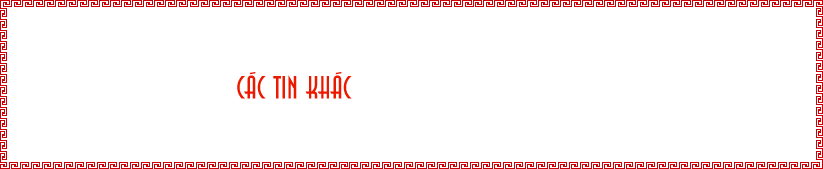
<style>
.page{position:relative;width:823px;height:169px;background:#ffffff}
.page>*{position:absolute;margin:0}
.t1{font:30px "HP-Anatas-Regular";color:#eb1900}
</style>
<div class="page">
<p class="t1" style="left:237px;top:72px;width:115px;height:27px">caùc tin khaùc</p>
</div>
